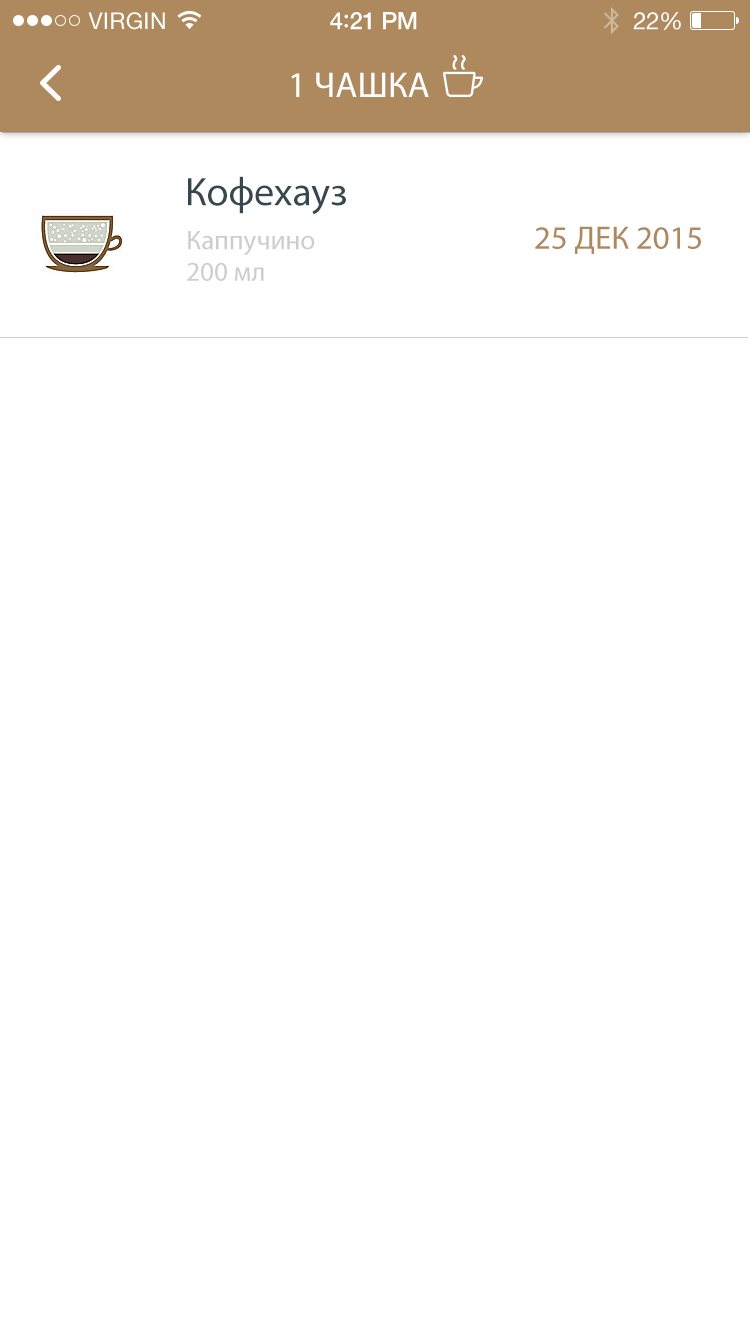
<style>
.page{position:relative;width:750px;height:1334px;background:#ffffff}
.page>*{position:absolute;margin:0}
.t1{font:23px "HelveticaNeue";letter-spacing:0.02em;color:#ffffff}
.t2{font:24px "HelveticaNeue-Medium";letter-spacing:-0.02em;color:#ffffff}
.t3{font:26px "Avenir-Medium";letter-spacing:-0.02em;color:#ffffff}
.t4{font:24px "HelveticaNeue";letter-spacing:-0.02em;color:#ffffff}
.t5{font:36px "MyriadPro-Regular";color:#ffffff;text-transform:uppercase}
.t6{font:40px "MyriadPro-Regular";color:#37474f}
.t7{font:27.2px/31.7px "MyriadPro-Regular";color:#cdcdcd}
.t8{font:32.7px "MyriadPro-Regular";color:#ae895d}
</style>
<div class="page">
<p class="t1" style="left:88px;top:12px;width:77px;height:18px">VIRGIN</p>
<p class="t2" style="left:330px;top:12px;width:87px;height:18px">4<span class="t3">:</span>21 PM</p>
<p class="t4" style="left:633px;top:12px;width:48px;height:18px">22%</p>
<p class="t5" style="left:291px;top:72px;width:138px;height:25px">1 чашка</p>
<p class="t6" style="left:188px;top:176px;width:158px;height:39px">Кофехауз</p>
<p class="t7" style="left:187px;top:231px;width:128px;height:50px">Каппучино<br>200 мл</p>
<p class="t8" style="left:535px;top:226px;width:166px;height:28px">25 ДЕК 2015</p>
</div>
